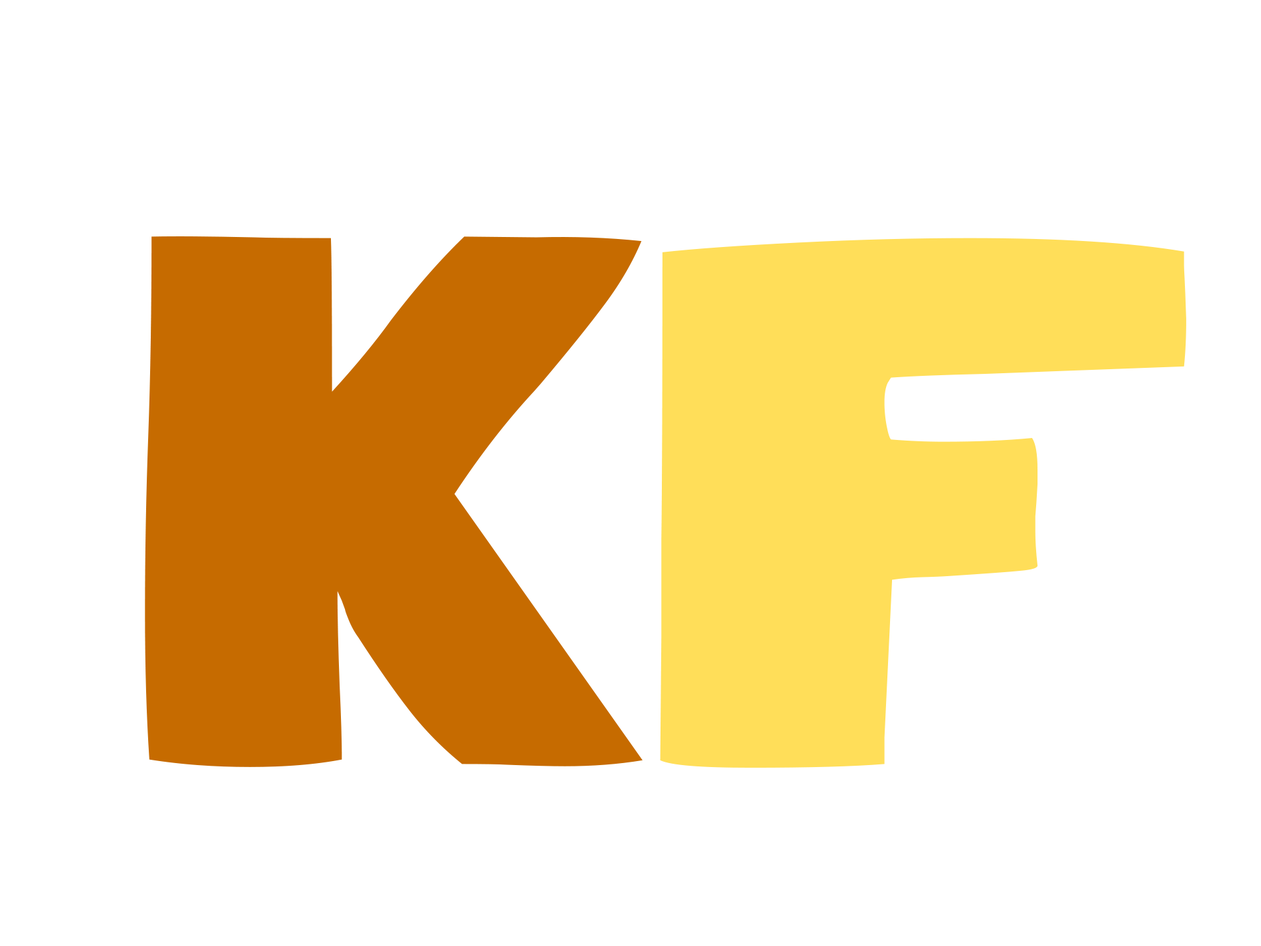
<style>
.page{position:relative;width:1261px;height:946px;background:#ffffff}
.page>*{position:absolute;margin:0}
.t1{font:745.5px "LondrinaSolid-Black";letter-spacing:0.01em;color:#c66b00;scale:1.47 1}
.t2{font:745.5px "LondrinaSolid-Black";letter-spacing:0.01em;color:#ffde59;scale:1.47 1}
</style>
<div class="page">
<p class="t1" style="left:145px;top:236px;width:1041px;height:531px">K<span class="t2">F</span></p>
</div>
